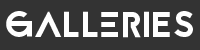
<style>
.page{position:relative;width:200px;height:50px;background:#333333}
.page>*{position:absolute;margin:0}
.t1{font:36px "Jaapokkisubtract-Regular";color:#ffffff}
.t2{font:36px "Jaapokkienchance-Regular";color:#ffffff}
</style>
<div class="page">
<p class="t1" style="left:6px;top:11px;width:187px;height:27px"><span class="t2">G</span>ALLERI<span class="t2">E</span>S</p>
</div>
